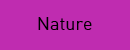
<style>
.page{position:relative;width:130px;height:50px;background:#bf2cb0}
.page>*{position:absolute;margin:0}
.t1{font:18px "DINAlternate-Regular";color:#000000}
</style>
<div class="page">
<p class="t1" style="left:38px;top:17px;width:54px;height:13px">Nature</p>
</div>
